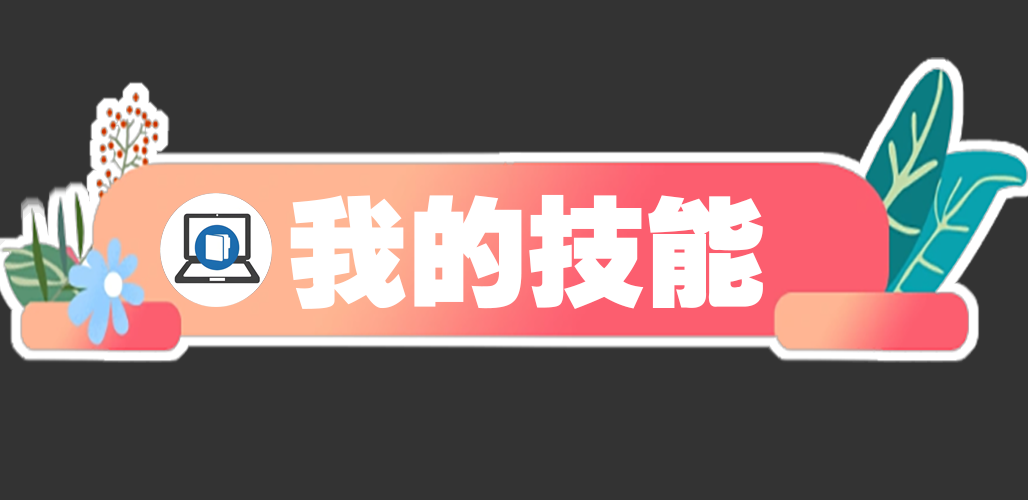
<style>
.page{position:relative;width:1028px;height:500px;background:#333333}
.page>*{position:absolute;margin:0}
.t1{font:119.4px "FZCCHJW--GB1-0";color:#ffffff}
</style>
<div class="page">
<p class="t1" style="left:290px;top:194px;width:473px;height:115px">我的技能</p>
</div>
